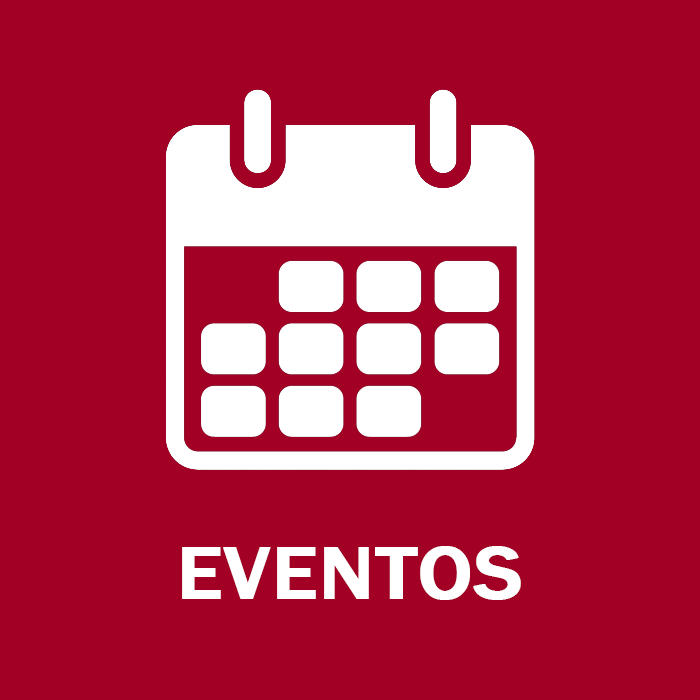
<style>
.page{position:relative;width:700px;height:700px;background:#a20025}
.page>*{position:absolute;margin:0}
.t1{font:77px "FranklinGothic-Medium";color:#ffffff;font-weight:bold;scale:1.09 1}
</style>
<div class="page">
<p class="t1" style="left:182px;top:546px;width:339px;height:54px">EVENTOS</p>
</div>
